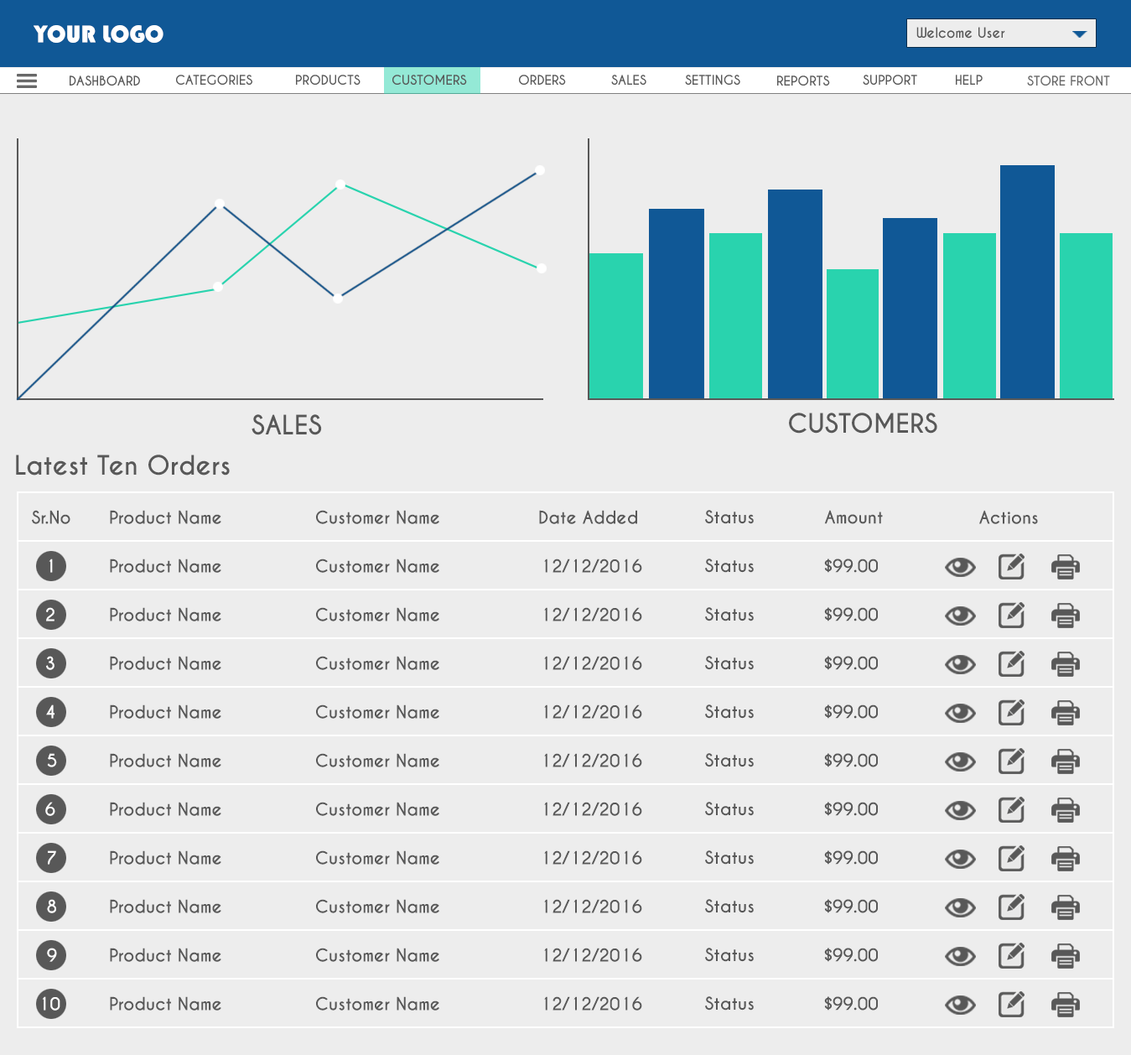
<style>
.page{position:relative;width:1131px;height:1055px;background:#ededed}
.page>*{position:absolute;margin:0}
.t1{font:25.1px "Bauhaus93";color:#ffffff}
.t2{font:13.4px "CaviarDreams-Bold";color:#585858}
.t3{font:12.6px "CaviarDreams-Bold";color:#585858;text-transform:uppercase}
.t4{font:12.6px "CaviarDreams-Bold";color:#686868;text-transform:uppercase}
.t5{font:25.1px "CaviarDreams-Bold";color:#585858;text-transform:uppercase}
.t6{font:25.1px "CaviarDreams-Bold";color:#585858}
.t7{font:16.8px "CaviarDreams-Bold";color:#585858}
.t8{font:16.8px "CaviarDreams-Bold";color:#ffffff}
</style>
<div class="page">
<p class="t1" style="left:34px;top:25px;width:129px;height:18px">YOUR LOGO</p>
<p class="t2" style="left:916px;top:27px;width:89px;height:12px">Welcome User</p>
<p class="t3" style="left:70px;top:75px;width:70px;height:11px">Dashboard</p>
<p class="t3" style="left:176px;top:75px;width:76px;height:10px">Categories</p>
<p class="t3" style="left:296px;top:75px;width:64px;height:10px">Products</p>
<p class="t3" style="left:392px;top:75px;width:75px;height:10px">Customers</p>
<p class="t3" style="left:519px;top:75px;width:47px;height:10px">Orders</p>
<p class="t3" style="left:611px;top:75px;width:35px;height:10px">Sales</p>
<p class="t3" style="left:685px;top:75px;width:55px;height:10px">Settings</p>
<p class="t3" style="left:777px;top:75px;width:53px;height:11px">Reports</p>
<p class="t3" style="left:863px;top:75px;width:54px;height:10px">Support</p>
<p class="t3" style="left:956px;top:75px;width:26px;height:10px">Help</p>
<p class="t4" style="left:1027px;top:75px;width:83px;height:11px">Store Front</p>
<p class="t5" style="left:789px;top:412px;width:148px;height:21px">Customers</p>
<p class="t5" style="left:251px;top:414px;width:71px;height:21px">Sales</p>
<p class="t6" style="left:16px;top:454px;width:214px;height:21px">Latest Ten Orders</p>
<p class="t7" style="left:32px;top:510px;width:38px;height:14px">Sr.No</p>
<p class="t7" style="left:110px;top:510px;width:111px;height:14px">Product Name</p>
<p class="t7" style="left:316px;top:510px;width:123px;height:14px">Customer Name</p>
<p class="t7" style="left:539px;top:510px;width:98px;height:14px">Date Added</p>
<p class="t7" style="left:705px;top:510px;width:49px;height:14px">Status</p>
<p class="t7" style="left:824px;top:510px;width:59px;height:14px">Amount</p>
<p class="t7" style="left:979px;top:510px;width:59px;height:14px">Actions</p>
<p class="t8" style="left:49px;top:558px;width:4px;height:15px">1</p>
<p class="t7" style="left:110px;top:558px;width:111px;height:15px">Product Name</p>
<p class="t7" style="left:316px;top:558px;width:123px;height:15px">Customer Name</p>
<p class="t7" style="left:544px;top:558px;width:98px;height:15px">12/12/2016</p>
<p class="t7" style="left:705px;top:558px;width:49px;height:15px">Status</p>
<p class="t7" style="left:824px;top:558px;width:54px;height:15px">$99.00</p>
<p class="t8" style="left:46px;top:607px;width:8px;height:14px">2</p>
<p class="t7" style="left:110px;top:607px;width:111px;height:14px">Product Name</p>
<p class="t7" style="left:316px;top:607px;width:123px;height:14px">Customer Name</p>
<p class="t7" style="left:544px;top:607px;width:98px;height:14px">12/12/2016</p>
<p class="t7" style="left:705px;top:607px;width:49px;height:14px">Status</p>
<p class="t7" style="left:824px;top:607px;width:54px;height:14px">$99.00</p>
<p class="t8" style="left:46px;top:656px;width:8px;height:14px">3</p>
<p class="t7" style="left:110px;top:656px;width:111px;height:14px">Product Name</p>
<p class="t7" style="left:316px;top:656px;width:123px;height:14px">Customer Name</p>
<p class="t7" style="left:544px;top:656px;width:98px;height:14px">12/12/2016</p>
<p class="t7" style="left:705px;top:656px;width:49px;height:14px">Status</p>
<p class="t7" style="left:824px;top:656px;width:54px;height:14px">$99.00</p>
<p class="t8" style="left:46px;top:704px;width:8px;height:14px">4</p>
<p class="t7" style="left:110px;top:704px;width:111px;height:14px">Product Name</p>
<p class="t7" style="left:316px;top:704px;width:123px;height:14px">Customer Name</p>
<p class="t7" style="left:544px;top:704px;width:98px;height:14px">12/12/2016</p>
<p class="t7" style="left:705px;top:704px;width:49px;height:14px">Status</p>
<p class="t7" style="left:824px;top:704px;width:54px;height:14px">$99.00</p>
<p class="t8" style="left:47px;top:753px;width:10px;height:14px">5</p>
<p class="t7" style="left:110px;top:753px;width:111px;height:14px">Product Name</p>
<p class="t7" style="left:316px;top:753px;width:123px;height:14px">Customer Name</p>
<p class="t7" style="left:544px;top:753px;width:98px;height:14px">12/12/2016</p>
<p class="t7" style="left:705px;top:753px;width:49px;height:14px">Status</p>
<p class="t7" style="left:824px;top:753px;width:54px;height:14px">$99.00</p>
<p class="t8" style="left:45px;top:801px;width:10px;height:15px">6</p>
<p class="t7" style="left:110px;top:801px;width:111px;height:15px">Product Name</p>
<p class="t7" style="left:316px;top:801px;width:123px;height:15px">Customer Name</p>
<p class="t7" style="left:544px;top:801px;width:98px;height:15px">12/12/2016</p>
<p class="t7" style="left:705px;top:801px;width:49px;height:15px">Status</p>
<p class="t7" style="left:824px;top:801px;width:54px;height:15px">$99.00</p>
<p class="t8" style="left:48px;top:850px;width:8px;height:14px">7</p>
<p class="t7" style="left:110px;top:850px;width:111px;height:14px">Product Name</p>
<p class="t7" style="left:316px;top:850px;width:123px;height:14px">Customer Name</p>
<p class="t7" style="left:544px;top:850px;width:98px;height:14px">12/12/2016</p>
<p class="t7" style="left:705px;top:850px;width:49px;height:14px">Status</p>
<p class="t7" style="left:824px;top:850px;width:54px;height:14px">$99.00</p>
<p class="t8" style="left:47px;top:899px;width:9px;height:14px">8</p>
<p class="t7" style="left:110px;top:899px;width:111px;height:14px">Product Name</p>
<p class="t7" style="left:316px;top:899px;width:123px;height:14px">Customer Name</p>
<p class="t7" style="left:544px;top:899px;width:98px;height:14px">12/12/2016</p>
<p class="t7" style="left:705px;top:899px;width:49px;height:14px">Status</p>
<p class="t7" style="left:824px;top:899px;width:54px;height:14px">$99.00</p>
<p class="t8" style="left:47px;top:947px;width:10px;height:14px">9</p>
<p class="t7" style="left:110px;top:947px;width:111px;height:14px">Product Name</p>
<p class="t7" style="left:316px;top:947px;width:123px;height:14px">Customer Name</p>
<p class="t7" style="left:544px;top:947px;width:98px;height:14px">12/12/2016</p>
<p class="t7" style="left:705px;top:947px;width:49px;height:14px">Status</p>
<p class="t7" style="left:824px;top:947px;width:54px;height:14px">$99.00</p>
<p class="t8" style="left:42px;top:996px;width:18px;height:14px">10</p>
<p class="t7" style="left:110px;top:996px;width:111px;height:14px">Product Name</p>
<p class="t7" style="left:316px;top:996px;width:123px;height:14px">Customer Name</p>
<p class="t7" style="left:544px;top:996px;width:98px;height:14px">12/12/2016</p>
<p class="t7" style="left:705px;top:996px;width:49px;height:14px">Status</p>
<p class="t7" style="left:824px;top:996px;width:54px;height:14px">$99.00</p>
</div>
